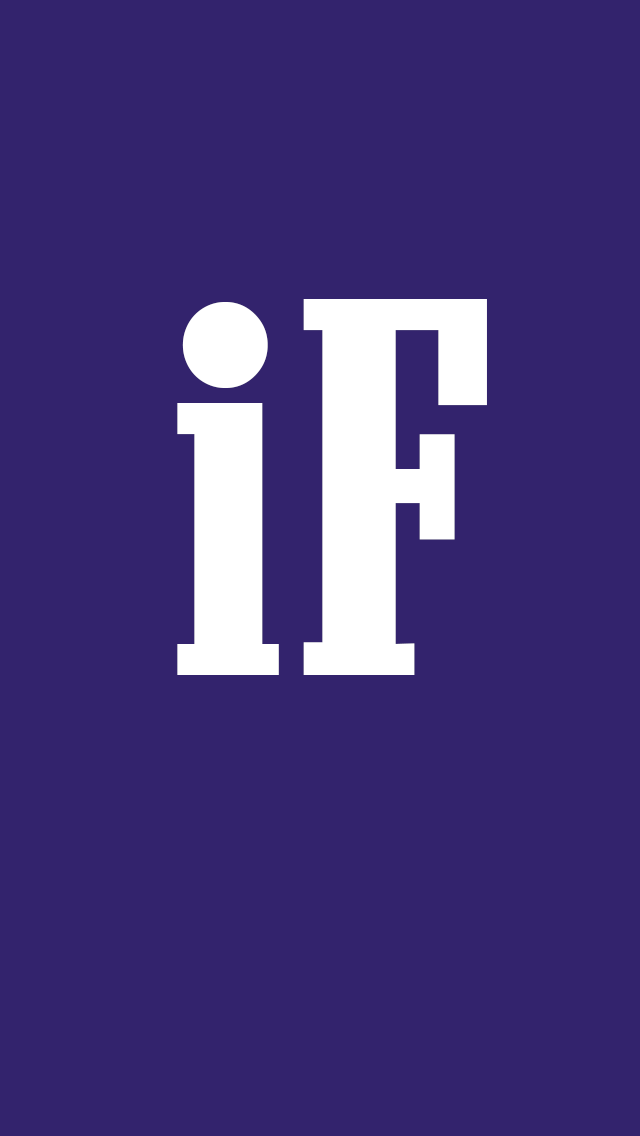
<style>
.page{position:relative;width:640px;height:1136px;background:#33236d}
.page>*{position:absolute;margin:0}
.t1{font:550px "Marlboro";color:#ffffff}
</style>
<div class="page">
<p class="t1" style="left:177px;top:299px;width:310px;height:376px">iF</p>
</div>
